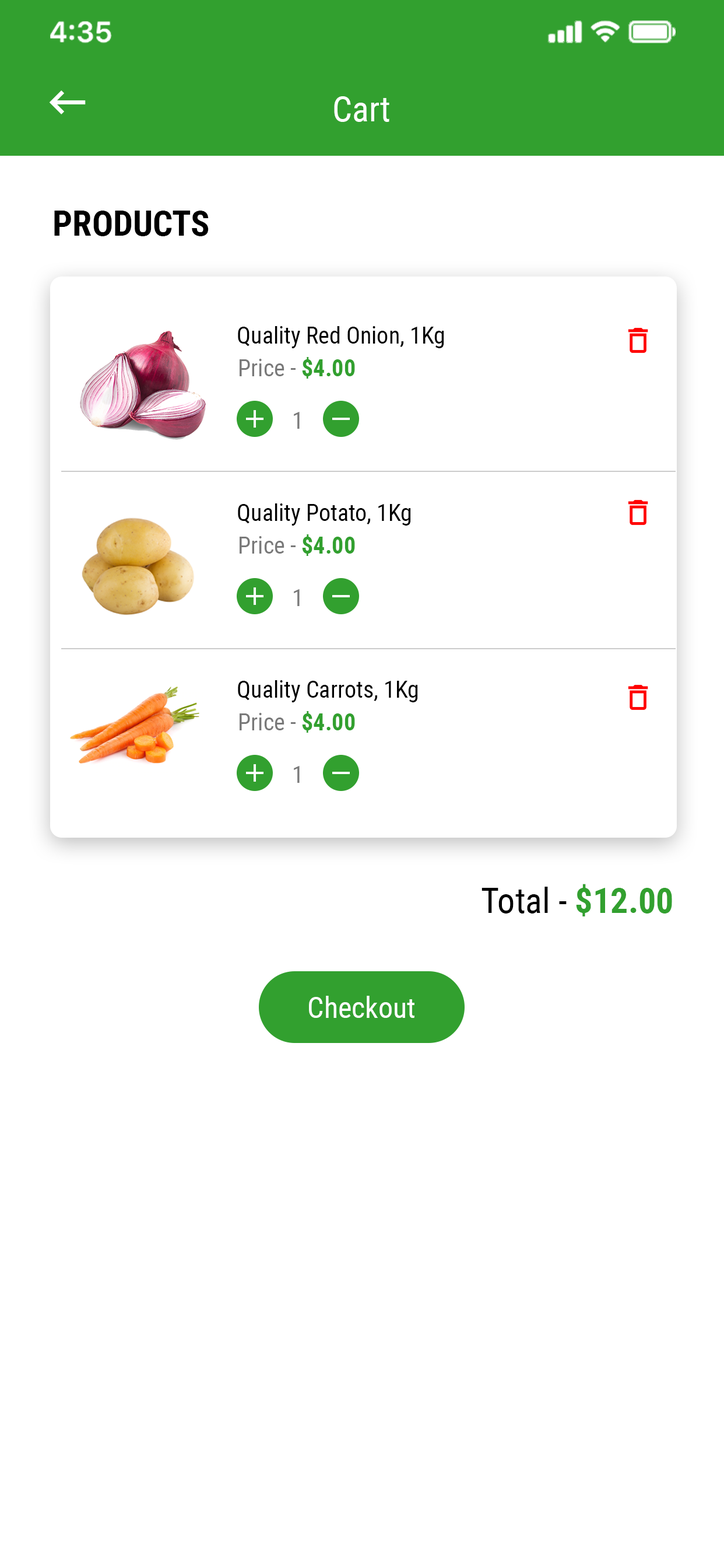
<style>
.page{position:relative;width:724px;height:1568px;background:#ffffff}
.page>*{position:absolute;margin:0}
.t1{font:35px "RobotoCondensed-Regular";color:#ffffff}
.t2{font:35px "RobotoCondensed-Bold";color:#000000;text-transform:uppercase}
.t3{font:23.3px "RobotoCondensed-Regular";color:#000000}
.t4{font:23.3px "RobotoCondensed-Regular";color:#797979}
.t5{font:23.3px "RobotoCondensed-Bold";color:#32a02f}
.t6{font:35px "RobotoCondensed-Regular";color:#000000}
.t7{font:35px "RobotoCondensed-Bold";color:#32a02f}
.t8{font:29.2px "RobotoCondensed-Regular";color:#fffefe}
</style>
<div class="page">
<p class="t1" style="left:334px;top:96px;width:56px;height:26px">Cart</p>
<p class="t2" style="left:54px;top:211px;width:155px;height:25px">Products</p>
<p class="t3" style="left:238px;top:326px;width:206px;height:22px">Quality Red Onion, 1Kg</p>
<p class="t4" style="left:240px;top:357px;width:115px;height:22px">Price - <span class="t5">$4.00</span></p>
<p class="t4" style="left:294px;top:412px;width:6px;height:17px">1</p>
<p class="t3" style="left:238px;top:503px;width:173px;height:23px">Quality Potato, 1Kg</p>
<p class="t4" style="left:240px;top:534px;width:115px;height:22px">Price - <span class="t5">$4.00</span></p>
<p class="t4" style="left:294px;top:589px;width:6px;height:17px">1</p>
<p class="t3" style="left:238px;top:680px;width:180px;height:22px">Quality Carrots, 1Kg</p>
<p class="t4" style="left:240px;top:711px;width:115px;height:22px">Price - <span class="t5">$4.00</span></p>
<p class="t4" style="left:294px;top:766px;width:6px;height:17px">1</p>
<p class="t6" style="left:482px;top:884px;width:191px;height:32px">Total - <span class="t7">$12.00</span></p>
<p class="t8" style="left:309px;top:996px;width:106px;height:22px">Checkout</p>
</div>
